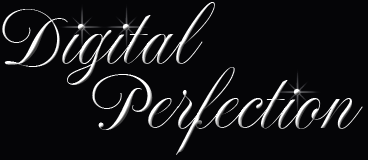
<style>
.page{position:relative;width:368px;height:160px;background:#050507}
.page>*{position:absolute;margin:0}
.t1{font:72px/65px "NotnorvalHmk"}
</style>
<div class="page">
<p class="t1" style="left:2px;top:2px;width:361px;height:153px">Digital<br>     Perfection</p>
</div>
